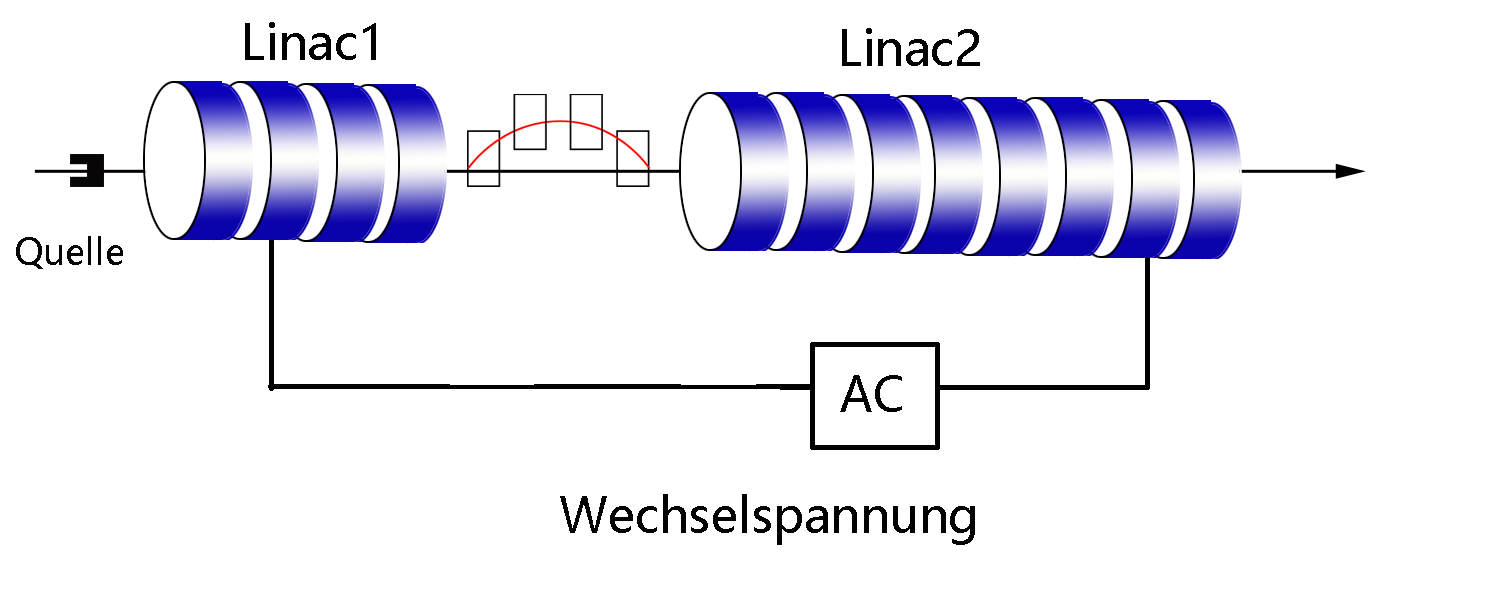
<style>
.page{position:relative;width:1492px;height:613px;background:#ffffff}
.page>*{position:absolute;margin:0}
.t1{font:48px "MicrosoftYaHei";color:#020202}
.t2{font:36px "MicrosoftYaHei";color:#070505}
</style>
<div class="page">
<p class="t1" style="left:245px;top:22px;width:131px;height:38px">Linac1</p>
<p class="t1" style="left:842px;top:28px;width:138px;height:38px">Linac2</p>
<p class="t2" style="left:16px;top:236px;width:107px;height:33px">Quelle</p>
<p class="t1" style="left:840px;top:375px;width:62px;height:37px">AC</p>
<p class="t1" style="left:560px;top:494px;width:415px;height:51px">Wechselspannung</p>
</div>
